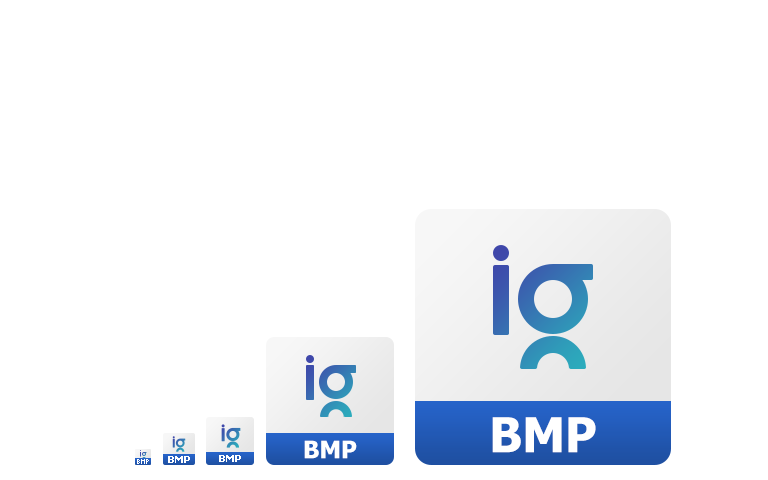
<style>
.page{position:relative;width:768px;height:480px;background:#ffffff}
.page>*{position:absolute;margin:0}
.t1{font:48px "Tahoma-Bold";color:#ffffff}
.t2{font:24px "Tahoma-Bold";color:#ffffff}
.t3{font:10px "Tahoma-Bold";color:#ffffff}
</style>
<div class="page">
<p class="t1" style="left:492px;top:417px;width:104px;height:36px">BMP</p>
<p class="t2" style="left:304px;top:440px;width:53px;height:19px">BMP</p>
<p class="t3" style="left:168px;top:456px;width:22px;height:7px">BMP</p>
<p class="t3" style="left:219px;top:455px;width:22px;height:7px">BMP</p>
</div>
